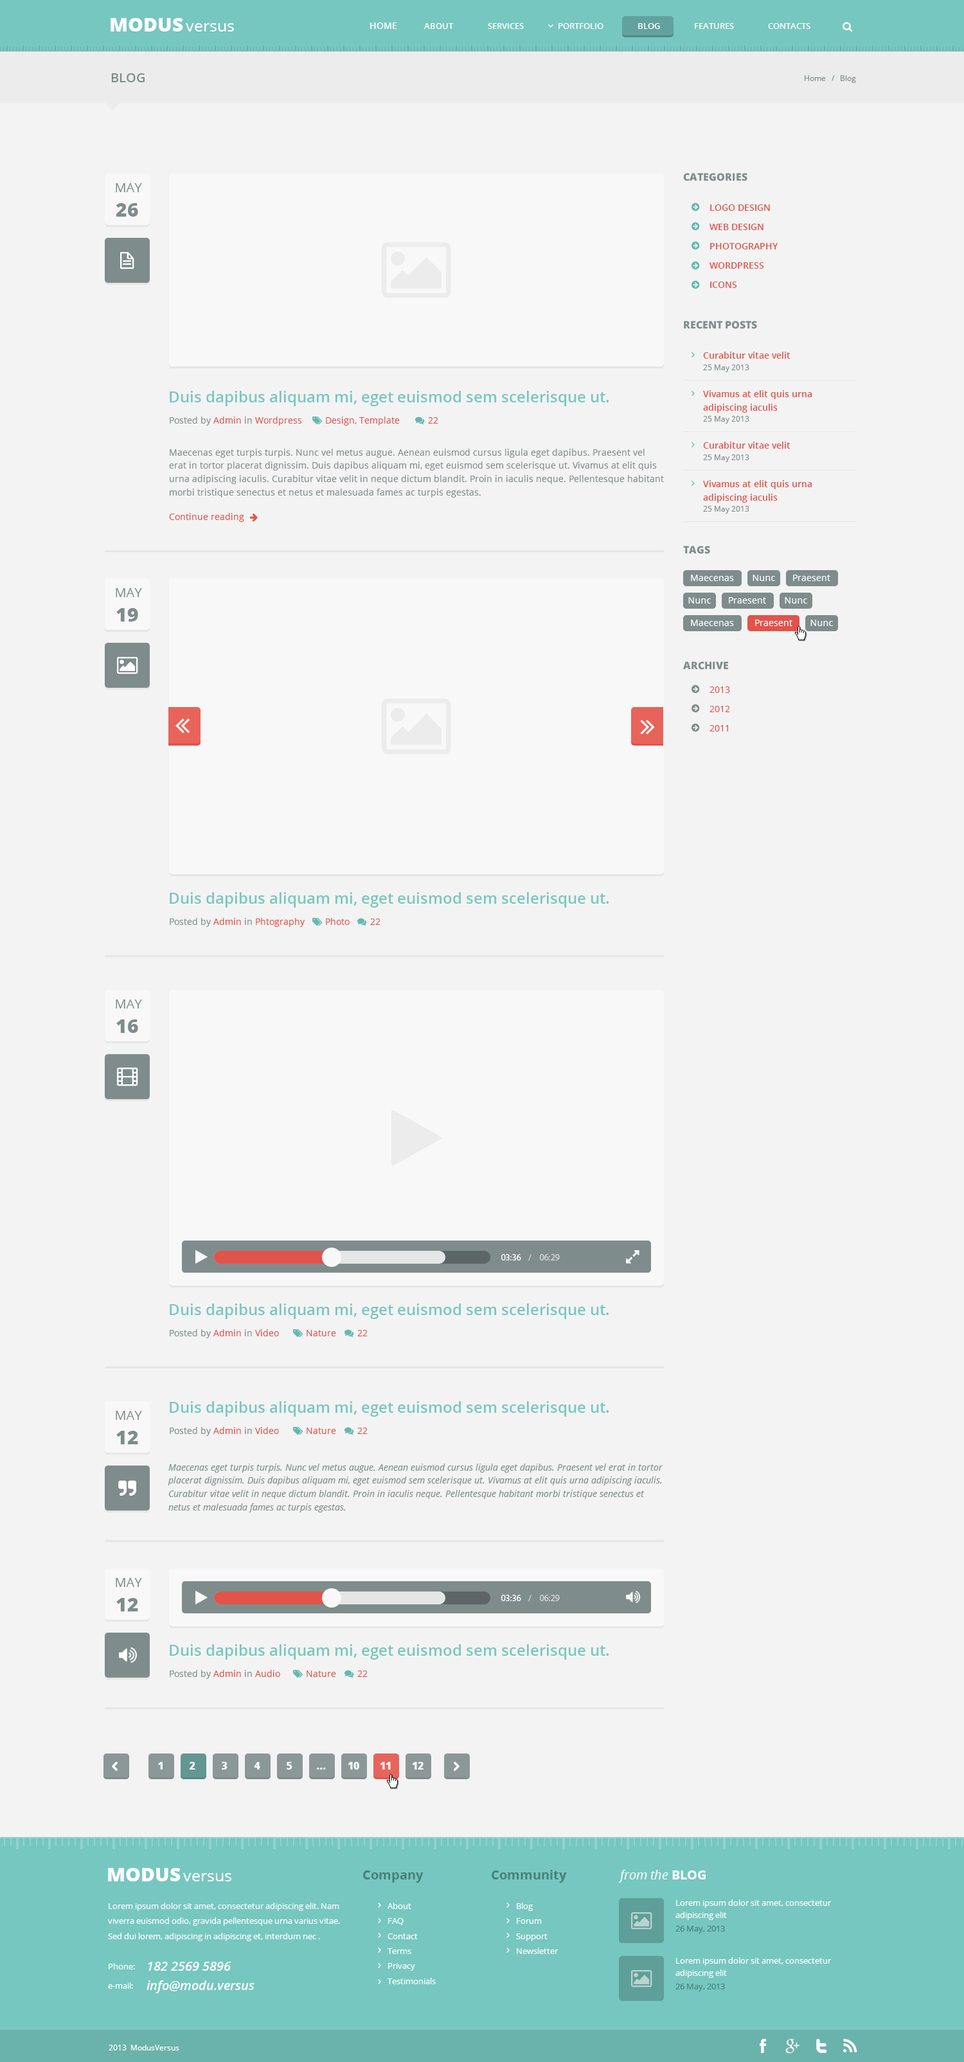
<style>
.page{position:relative;width:964px;height:2062px;background:#f3f3f3}
.page>*{position:absolute;margin:0}
.t1{font:19.3px "OpenSans-Extrabold";color:#ffffff}
.t2{font:16.1px "OpenSans";color:#ffffff}
.t3{font:9px "OpenSans-Semibold";color:#ffffff}
.t4{font:8.4px "OpenSans-Semibold";color:#ffffff}
.t5{font:12.9px "OpenSans-Semibold";color:#7f8c8c}
.t6{font:7.7px "OpenSans";color:#7f8c8c}
.t7{font:10.3px "OpenSans-Extrabold";color:#7f8c8c}
.t8{font:12.9px "OpenSans";color:#7f8c8c}
.t9{font:19.3px "OpenSans-Extrabold";color:#7f8c8c}
.t10{font:9px/19.3px "OpenSans-Semibold";color:#e2534b}
.t11{font:9px "OpenSans-Semibold";color:#e2534b}
.t12{font:15.4px "OpenSans-Semibold";color:#76c7c0}
.t13{font:9px/13.4px "OpenSans-Semibold";color:#e2534b}
.t14{font:9px "OpenSans";color:#7f8c8c}
.t15{font:9px "OpenSans";color:#e2534b}
.t16{font:9px/13.4px "OpenSans";color:#7f8c8c}
.t17{font:9px "OpenSans";color:#ffffff}
.t18{font:9px/19.3px "OpenSans";color:#e2534b}
.t19{font:9px "MyriadPro-Regular";color:#dad9d9}
.t20{font:9px "MyriadPro-Regular";color:#ffffff}
.t21{font:9px/13.4px "OpenSans-Italic";color:#7f8c8c}
.t22{font:10.3px "OpenSans-Extrabold";color:#ffffff}
.t23{font:12.9px "OpenSans-Bold";color:#497e79}
.t24{font:12.9px "OpenSans-Italic";color:#ffffff}
.t25{font:12.9px "OpenSans-Bold";color:#ffffff}
.t26{font:8.4px/12.5px "OpenSans";color:#ffffff}
.t27{font:8.4px/15px "OpenSans";color:#ffffff}
.t28{font:8.4px "OpenSans";color:#497e79}
.t29{font:8.4px "OpenSans";color:#ffffff}
.t30{font:12.9px "OpenSans-SemiboldItalic";color:#ffffff}
.t31{font:7.7px "OpenSans";color:#ffffff}
</style>
<div class="page">
<p class="t1" style="left:111px;top:18px;width:72px;height:14px">MODUS</p>
<p class="t2" style="left:186px;top:23px;width:48px;height:9px">versus</p>
<p class="t3" style="left:370px;top:22px;width:27px;height:7px">HOME</p>
<p class="t4" style="left:424px;top:23px;width:30px;height:6px">ABOUT</p>
<p class="t4" style="left:488px;top:23px;width:36px;height:6px">SERVICES</p>
<p class="t4" style="left:559px;top:23px;width:45px;height:6px">PORTFOLIO</p>
<p class="t4" style="left:638px;top:23px;width:22px;height:6px">BLOG</p>
<p class="t4" style="left:695px;top:23px;width:39px;height:6px">FEATURES</p>
<p class="t4" style="left:768px;top:23px;width:43px;height:6px">CONTACTS</p>
<p class="t5" style="left:111px;top:73px;width:34px;height:9px">BLOG</p>
<p class="t6" style="left:805px;top:75px;width:51px;height:8px">Home   /   Blog</p>
<p class="t7" style="left:683px;top:173px;width:65px;height:8px">CATEGORIES</p>
<p class="t8" style="left:116px;top:183px;width:26px;height:9px">MAY</p>
<p class="t9" style="left:116px;top:203px;width:22px;height:14px">26</p>
<p class="t10" style="left:710px;top:204px;width:69px;height:84px">LOGO DESIGN<br>WEB DESIGN<br>PHOTOGRAPHY<br>WORDPRESS<br>ICONS</p>
<p class="t7" style="left:684px;top:321px;width:73px;height:8px">RECENT POSTS</p>
<p class="t11" style="left:703px;top:352px;width:88px;height:7px">Curabitur vitae velit</p>
<p class="t6" style="left:703px;top:364px;width:47px;height:8px">25 May 2013</p>
<p class="t12" style="left:170px;top:391px;width:439px;height:15px">Duis dapibus aliquam mi, eget euismod sem scelerisque ut.</p>
<p class="t13" style="left:703px;top:390px;width:110px;height:23px">Vivamus at elit quis urna adipiscing iaculis</p>
<p class="t14" style="left:170px;top:417px;width:132px;height:9px">Posted by <span class="t15">Admin </span>in <span class="t15">Wordpress</span></p>
<p class="t15" style="left:326px;top:417px;width:74px;height:9px">Design, Template</p>
<p class="t15" style="left:428px;top:417px;width:10px;height:7px">22</p>
<p class="t6" style="left:703px;top:416px;width:47px;height:8px">25 May 2013</p>
<p class="t16" style="left:169px;top:449px;width:495px;height:49px">Maecenas eget turpis turpis. Nunc vel metus augue. Aenean euismod cursus ligula eget dapibus. Praesent vel erat in tortor placerat dignissim. Duis dapibus aliquam mi, eget euismod sem scelerisque ut. Vivamus at elit quis urna adipiscing iaculis. Curabitur vitae velit in neque dictum blandit. Proin in iaculis neque. Pellentesque habitant morbi tristique senectus et netus et malesuada fames ac turpis egestas.</p>
<p class="t11" style="left:703px;top:442px;width:88px;height:7px">Curabitur vitae velit</p>
<p class="t6" style="left:703px;top:455px;width:47px;height:7px">25 May 2013</p>
<p class="t13" style="left:703px;top:480px;width:110px;height:23px">Vivamus at elit quis urna adipiscing iaculis</p>
<p class="t6" style="left:703px;top:506px;width:47px;height:8px">25 May 2013</p>
<p class="t15" style="left:169px;top:513px;width:75px;height:9px">Continue reading</p>
<p class="t7" style="left:683px;top:546px;width:27px;height:8px">TAGS</p>
<p class="t17" style="left:691px;top:575px;width:43px;height:6px">Maecenas</p>
<p class="t17" style="left:753px;top:575px;width:22px;height:6px">Nunc</p>
<p class="t17" style="left:793px;top:575px;width:38px;height:6px">Praesent</p>
<p class="t8" style="left:116px;top:588px;width:26px;height:9px">MAY</p>
<p class="t17" style="left:688px;top:597px;width:23px;height:7px">Nunc</p>
<p class="t17" style="left:729px;top:597px;width:37px;height:7px">Praesent</p>
<p class="t17" style="left:785px;top:597px;width:22px;height:7px">Nunc</p>
<p class="t9" style="left:116px;top:608px;width:22px;height:14px">19</p>
<p class="t17" style="left:691px;top:620px;width:43px;height:6px">Maecenas</p>
<p class="t17" style="left:755px;top:620px;width:38px;height:6px">Praesent</p>
<p class="t17" style="left:811px;top:620px;width:22px;height:6px">Nunc</p>
<p class="t7" style="left:683px;top:662px;width:45px;height:8px">ARCHIVE</p>
<p class="t18" style="left:710px;top:687px;width:20px;height:45px">2013<br>2012<br>2011</p>
<p class="t12" style="left:170px;top:892px;width:439px;height:16px">Duis dapibus aliquam mi, eget euismod sem scelerisque ut.</p>
<p class="t15" style="left:170px;top:918px;width:135px;height:9px"><span class="t14">Posted by </span>Admin <span class="t14">in </span>Phtography</p>
<p class="t15" style="left:326px;top:918px;width:24px;height:7px">Photo</p>
<p class="t15" style="left:370px;top:919px;width:11px;height:6px">22</p>
<p class="t8" style="left:116px;top:1000px;width:26px;height:9px">MAY</p>
<p class="t9" style="left:116px;top:1020px;width:22px;height:13px">16</p>
<p class="t19" style="left:501px;top:1254px;width:59px;height:7px"><span class="t20">03:36    </span>/    06:29</p>
<p class="t12" style="left:170px;top:1304px;width:439px;height:15px">Duis dapibus aliquam mi, eget euismod sem scelerisque ut.</p>
<p class="t14" style="left:170px;top:1329px;width:109px;height:9px">Posted by <span class="t15">Admin </span>in <span class="t15">Video</span></p>
<p class="t15" style="left:307px;top:1330px;width:29px;height:6px">Nature</p>
<p class="t15" style="left:357px;top:1330px;width:11px;height:6px">22</p>
<p class="t12" style="left:170px;top:1401px;width:439px;height:16px">Duis dapibus aliquam mi, eget euismod sem scelerisque ut.</p>
<p class="t8" style="left:116px;top:1411px;width:26px;height:9px">MAY</p>
<p class="t9" style="left:116px;top:1431px;width:22px;height:13px">12</p>
<p class="t14" style="left:170px;top:1427px;width:109px;height:9px">Posted by <span class="t15">Admin </span>in <span class="t15">Video</span></p>
<p class="t15" style="left:307px;top:1428px;width:29px;height:6px">Nature</p>
<p class="t15" style="left:357px;top:1428px;width:11px;height:6px">22</p>
<p class="t21" style="left:168px;top:1464px;width:495px;height:49px">Maecenas eget turpis turpis. Nunc vel metus augue. Aenean euismod cursus ligula eget dapibus. Praesent vel erat in tortor placerat dignissim. Duis dapibus aliquam mi, eget euismod sem scelerisque ut. Vivamus at elit quis urna adipiscing iaculis. Curabitur vitae velit in neque dictum blandit. Proin in iaculis neque. Pellentesque habitant morbi tristique senectus et netus et malesuada fames ac turpis egestas.</p>
<p class="t8" style="left:116px;top:1578px;width:26px;height:9px">MAY</p>
<p class="t9" style="left:116px;top:1598px;width:22px;height:14px">12</p>
<p class="t19" style="left:501px;top:1595px;width:59px;height:7px"><span class="t20">03:36    </span>/    06:29</p>
<p class="t12" style="left:170px;top:1644px;width:439px;height:16px">Duis dapibus aliquam mi, eget euismod sem scelerisque ut.</p>
<p class="t14" style="left:170px;top:1670px;width:110px;height:9px">Posted by <span class="t15">Admin </span>in <span class="t15">Audio</span></p>
<p class="t15" style="left:307px;top:1671px;width:29px;height:6px">Nature</p>
<p class="t15" style="left:357px;top:1671px;width:11px;height:6px">22</p>
<p class="t22" style="left:158px;top:1762px;width:5px;height:8px">1</p>
<p class="t22" style="left:190px;top:1762px;width:5px;height:8px">2</p>
<p class="t22" style="left:222px;top:1762px;width:6px;height:8px">3</p>
<p class="t22" style="left:254px;top:1762px;width:6px;height:8px">4</p>
<p class="t22" style="left:287px;top:1762px;width:5px;height:8px">5</p>
<p class="t22" style="left:317px;top:1768px;width:9px;height:2px">...</p>
<p class="t22" style="left:348px;top:1762px;width:11px;height:8px">10</p>
<p class="t22" style="left:380px;top:1762px;width:11px;height:8px">11</p>
<p class="t22" style="left:412px;top:1762px;width:12px;height:8px">12</p>
<p class="t1" style="left:108px;top:1868px;width:73px;height:14px">MODUS</p>
<p class="t2" style="left:183px;top:1873px;width:48px;height:9px">versus</p>
<p class="t23" style="left:363px;top:1871px;width:61px;height:12px">Company</p>
<p class="t23" style="left:492px;top:1870px;width:75px;height:13px">Community</p>
<p class="t24" style="left:618px;top:1870px;width:88px;height:13px">from the <span class="t25">BLOG</span></p>
<p class="t26" style="left:676px;top:1900px;width:156px;height:20px">Lorem ipsum dolor sit amet, consectetur adipiscing elit</p>
<p class="t27" style="left:108px;top:1903px;width:232px;height:38px">Lorem ipsum dolor sit amet, consectetur adipiscing elit. Nam viverra euismod odio, gravida pellentesque urna varius vitae. Sed dui lorem, adipiscing in adipiscing et, interdum nec .</p>
<p class="t27" style="left:388px;top:1903px;width:48px;height:82px">About<br>FAQ<br>Contact<br>Terms<br>Privacy<br>Testimonials</p>
<p class="t27" style="left:516px;top:1903px;width:43px;height:51px">Blog<br>Forum<br>Support<br>Newsletter</p>
<p class="t28" style="left:676px;top:1926px;width:49px;height:8px">26 May, 2013</p>
<p class="t26" style="left:676px;top:1958px;width:156px;height:20px">Lorem ipsum dolor sit amet, consectetur adipiscing elit</p>
<p class="t29" style="left:109px;top:1963px;width:26px;height:7px">Phone:</p>
<p class="t30" style="left:148px;top:1962px;width:83px;height:9px">182 2569 5896</p>
<p class="t29" style="left:108px;top:1983px;width:25px;height:6px">e-mail:</p>
<p class="t30" style="left:147px;top:1981px;width:108px;height:13px">info@modu.versus</p>
<p class="t28" style="left:676px;top:1984px;width:49px;height:8px">26 May, 2013</p>
<p class="t31" style="left:109px;top:2045px;width:70px;height:6px">2013  ModusVersus</p>
</div>
